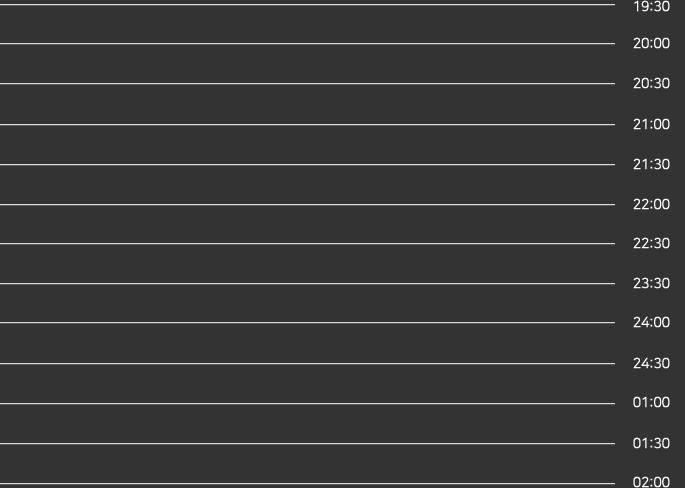
<style>
.page{position:relative;width:685px;height:488px;background:#333333}
.page>*{position:absolute;margin:0}
.t1{font:14px "NanumSquareR";letter-spacing:-0.01em;color:#ffffff}
</style>
<div class="page">
<p class="t1" style="left:634px;top:0px;width:36px;height:12px">19:30</p>
<p class="t1" style="left:633px;top:37px;width:37px;height:12px">20:00</p>
<p class="t1" style="left:633px;top:77px;width:37px;height:12px">20:30</p>
<p class="t1" style="left:633px;top:118px;width:37px;height:12px">21:00</p>
<p class="t1" style="left:633px;top:158px;width:37px;height:12px">21:30</p>
<p class="t1" style="left:633px;top:198px;width:37px;height:12px">22:00</p>
<p class="t1" style="left:633px;top:237px;width:37px;height:12px">22:30</p>
<p class="t1" style="left:633px;top:277px;width:37px;height:12px">23:30</p>
<p class="t1" style="left:633px;top:316px;width:37px;height:12px">24:00</p>
<p class="t1" style="left:633px;top:357px;width:37px;height:12px">24:30</p>
<p class="t1" style="left:633px;top:396px;width:37px;height:12px">01:00</p>
<p class="t1" style="left:633px;top:437px;width:37px;height:12px">01:30</p>
<p class="t1" style="left:633px;top:476px;width:37px;height:12px">02:00</p>
</div>
